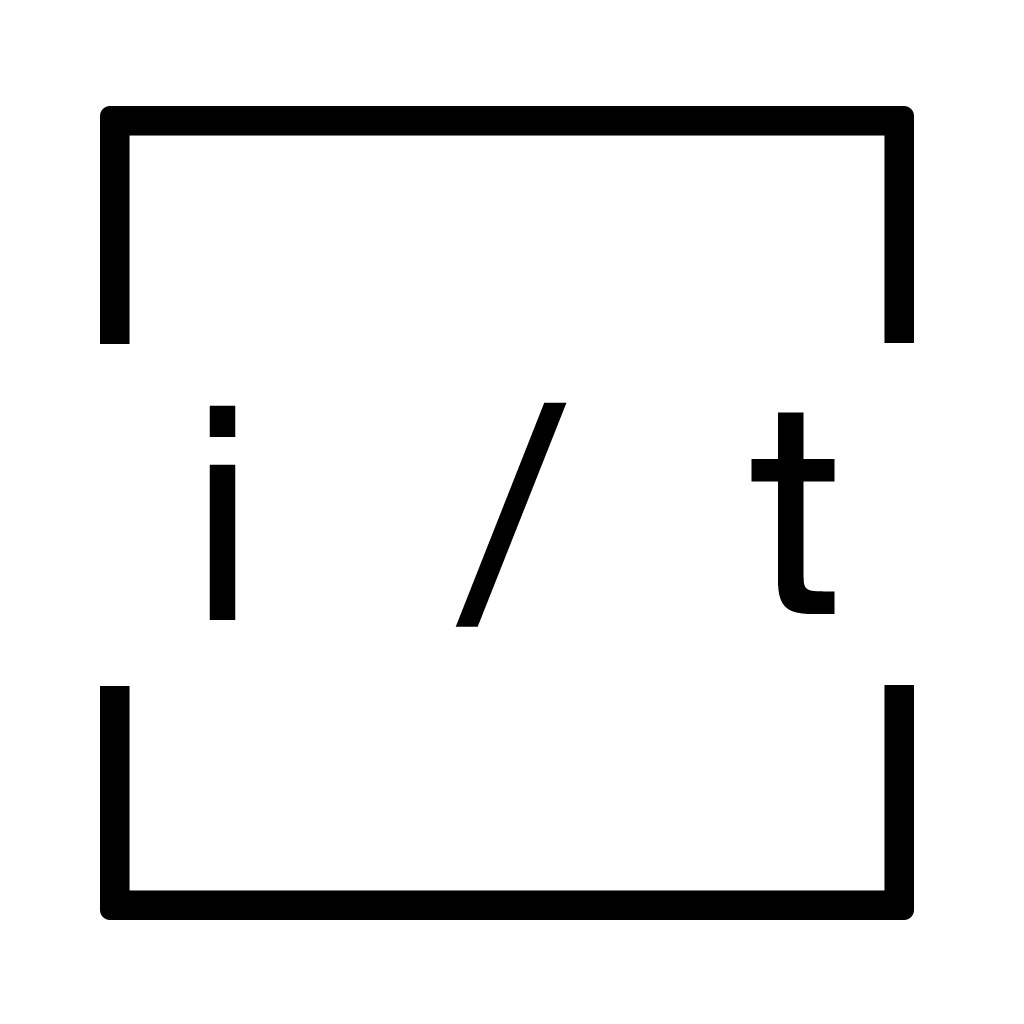
<style>
.page{position:relative;width:1024px;height:1024px;background:#ffffff}
.page>*{position:absolute;margin:0}
.t1{font:300px "HelveticaNeue";color:#000000}
</style>
<div class="page">
<p class="t1" style="left:209px;top:405px;width:27px;height:215px">i</p>
<p class="t1" style="left:455px;top:402px;width:112px;height:225px">/</p>
<p class="t1" style="left:751px;top:412px;width:84px;height:202px">t</p>
</div>
